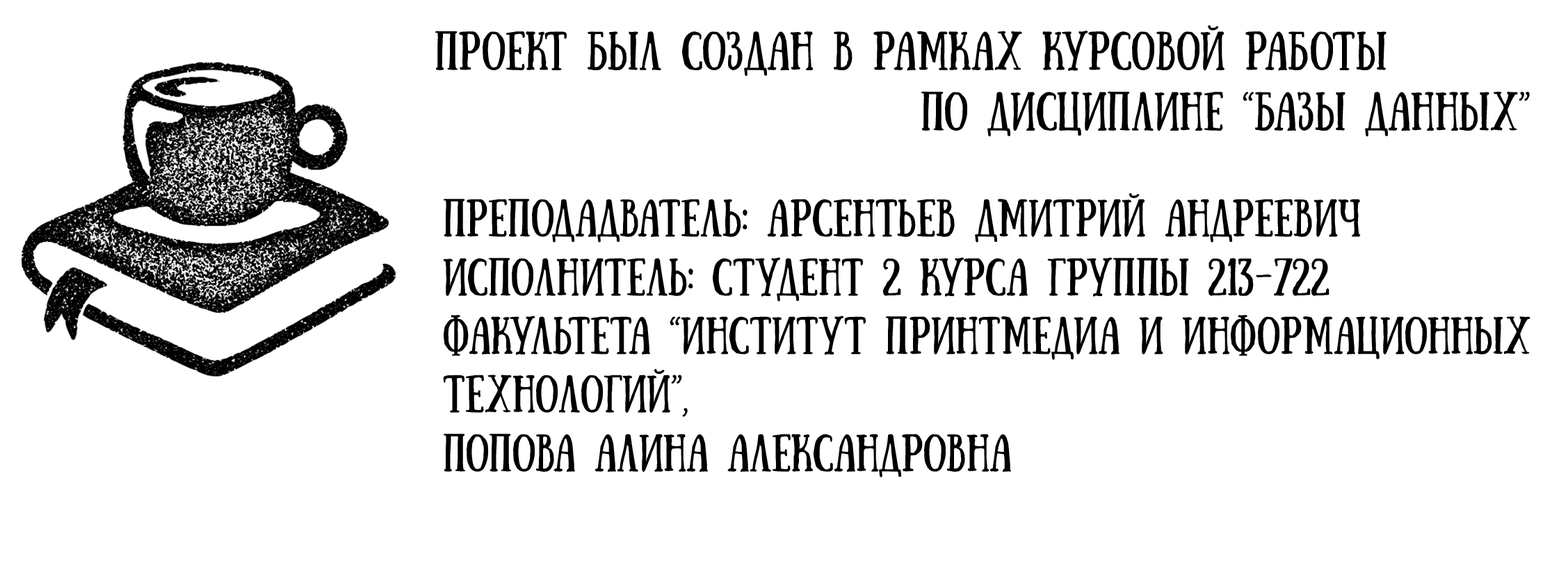
<style>
.page{position:relative;width:1568px;height:572px;background:#ffffff}
.page>*{position:absolute;margin:0}
.t1{font:38.6px/30.3px "Sunday-Regular";color:#000000}
.t2{font:37.4px/29.3px "Sunday-Regular";color:#000000}
</style>
<div class="page">
<p class="t1" style="left:435px;top:25px;width:1095px;height:112px;text-align:center">Проект был создан в рамках курсовой работы <br><br>по дисциплине “базы данных”</p>
<p class="t2" style="left:443px;top:193px;width:1087px;height:285px">преподадватель: Арсентьев Дмитрий Андреевич<br><br>исполнитель: студент 2 курса группы 213-722<br><br>факультета “Институт принтмедиа и информационных <br><br>технологий”, <br><br>попова алина александровна</p>
</div>
